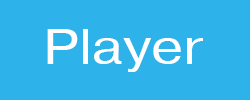
<style>
.page{position:relative;width:250px;height:100px;background:#2db2ea}
.page>*{position:absolute;margin:0}
.t1{font:48px "Helvetica";color:#ffffff;scale:1.2 1}
</style>
<div class="page">
<p class="t1" style="left:47px;top:29px;width:156px;height:43px">Player</p>
</div>
